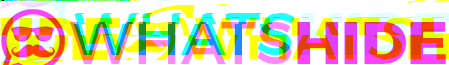
<style>
.page{position:relative;width:449px;height:65px;background:#ffffff}
.page>*{position:absolute;margin:0}
.t1{font:60.5px "Montserrat-Regular"}
.t2{font:60.5px "Montserrat-ExtraBold"}
</style>
<div class="page">
<p class="t1" style="left:70px;top:13px;width:376px;height:42px">WHATS<span class="t2">HIDE</span></p>
</div>
